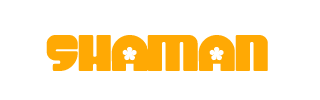
<style>
.page{position:relative;width:320px;height:100px;background:#ffffff}
.page>*{position:absolute;margin:0}
.t1{font:72px "Chick";color:#ffa904}
</style>
<div class="page">
<p class="t1" style="left:46px;top:35px;width:222px;height:36px">SHAMAN</p>
</div>
